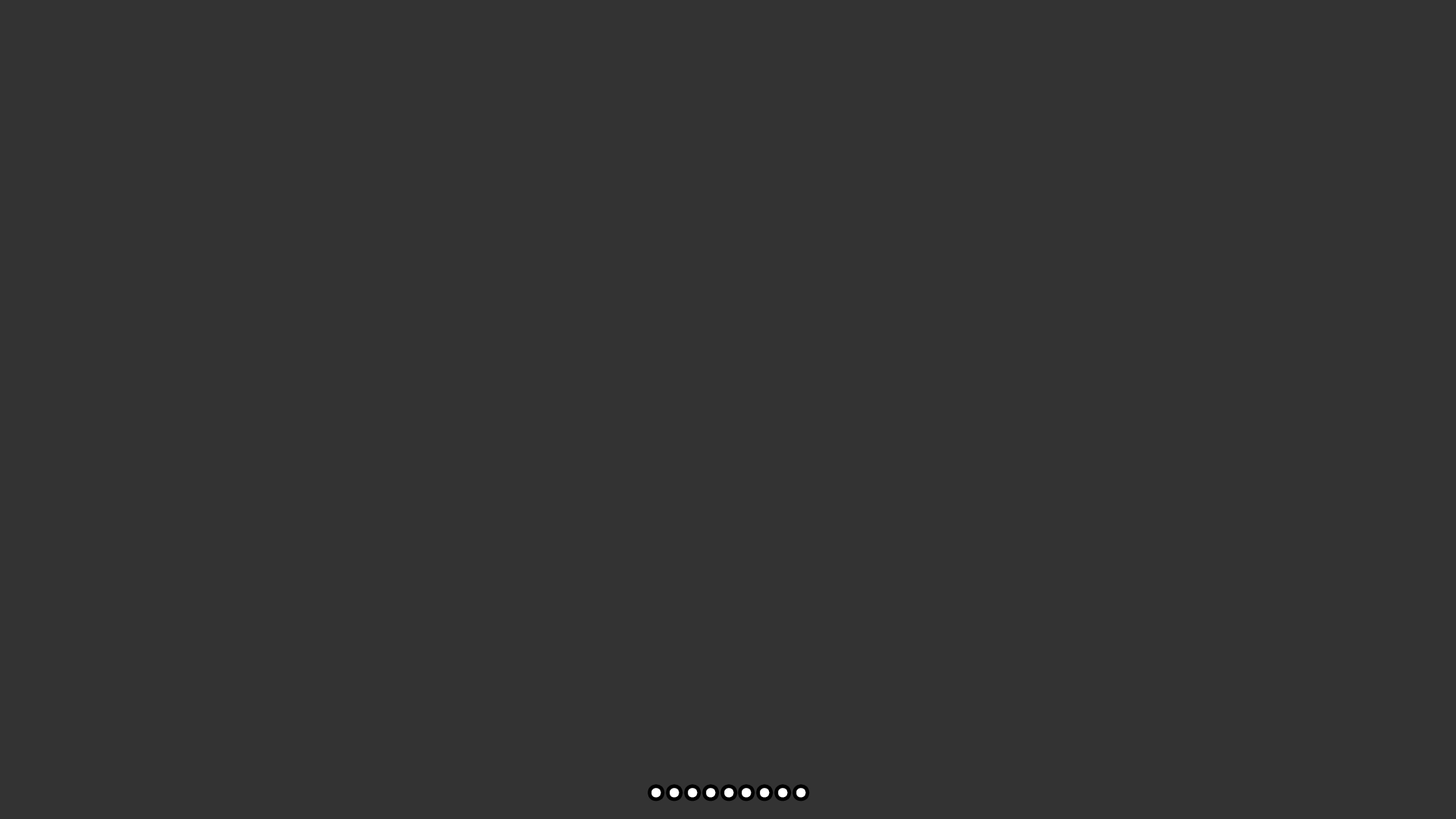
<style>
.page{position:relative;width:1456px;height:819px;background:#333333}
.page>*{position:absolute;margin:0}
.t1{font:53.1px "HGPMinchoE";letter-spacing:0.1em;color:#ffffff}
</style>
<div class="page">
<p class="t1" style="left:651px;top:788px;width:155px;height:10px">.........</p>
</div>
